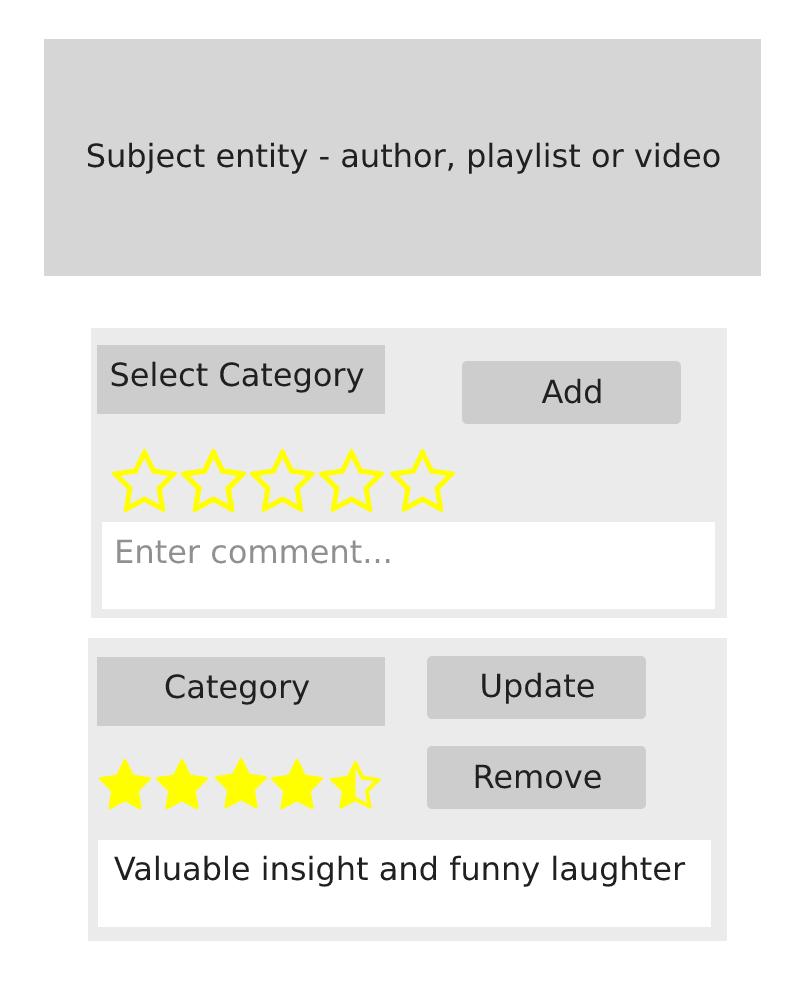
<style>
.page{position:relative;width:800px;height:1000px;background:#ffffff}
.page>*{position:absolute;margin:0}
.t1{font:32px "DejaVuSans";color:#202020}
.t2{font:32px "DejaVuSans";color:#909090}
</style>
<div class="page">
<p class="t1" style="left:87px;top:142px;width:633px;height:32px">Subject entity - author, playlist or video</p>
<p class="t1" style="left:111px;top:361px;width:253px;height:32px">Select Category</p>
<p class="t1" style="left:541px;top:378px;width:60px;height:26px">Add</p>
<p class="t2" style="left:117px;top:539px;width:273px;height:25px">Enter comment...</p>
<p class="t1" style="left:165px;top:674px;width:145px;height:31px">Category</p>
<p class="t1" style="left:482px;top:672px;width:112px;height:32px">Update</p>
<p class="t1" style="left:475px;top:764px;width:126px;height:25px">Remove</p>
<p class="t1" style="left:114px;top:855px;width:572px;height:32px">Valuable insight and funny laughter</p>
</div>
